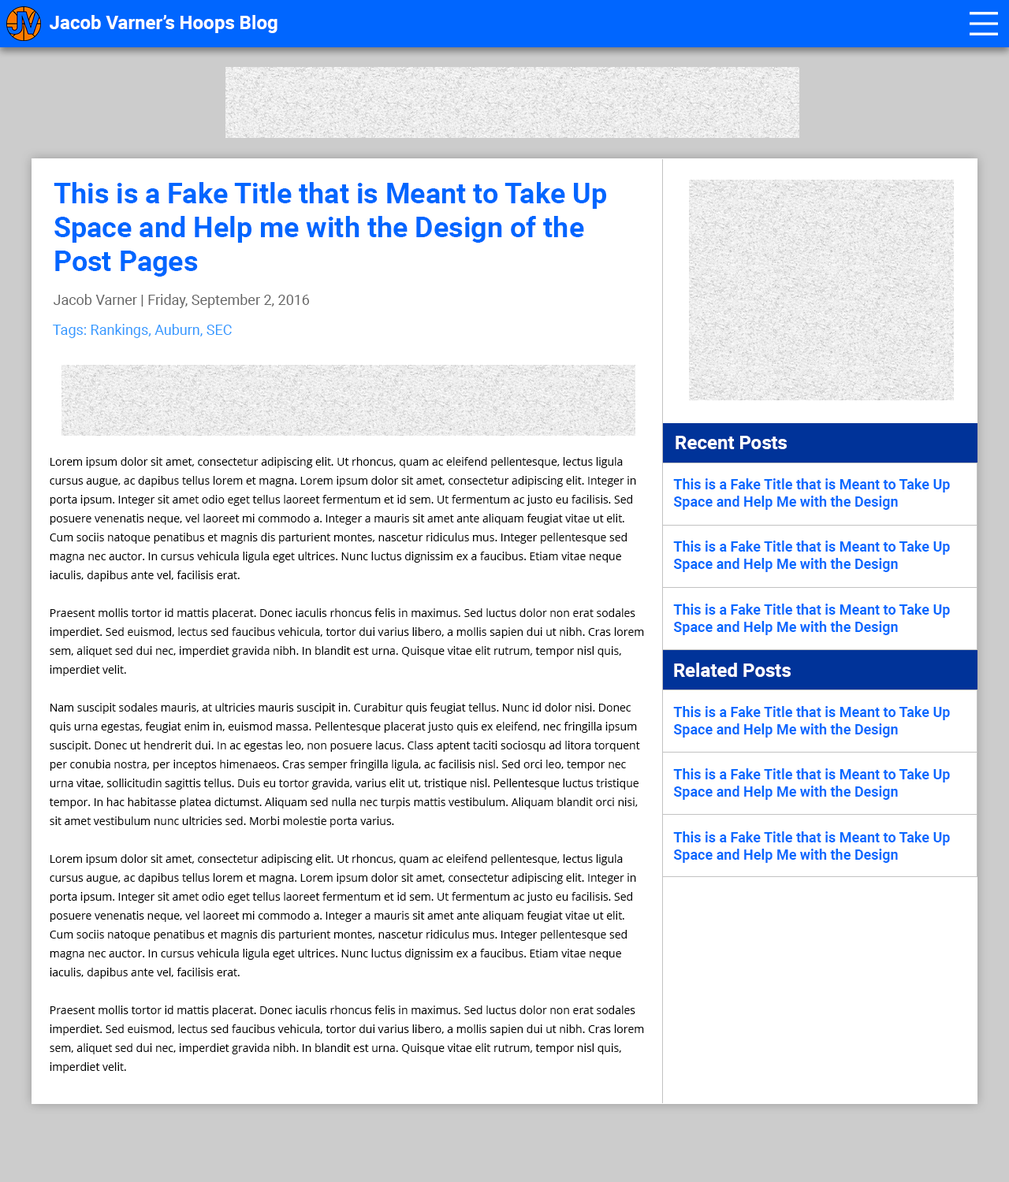
<style>
.page{position:relative;width:1009px;height:1182px;background:#ffffff}
.page>*{position:absolute;margin:0}
.t1{font:18.9px "Roboto-Bold";color:#ffffff}
.t2{font:28.4px "Roboto-Bold";color:#0066ff}
.t3{font:14.2px "Roboto-Regular";color:#666666}
.t4{font:14.2px "Roboto-Regular";color:#3399ff}
.t5{font:11px/18.9px "OpenSans";color:#000000}
.t6{font:14.2px "Roboto-Bold";color:#0769ff}
</style>
<div class="page">
<p class="t1" style="left:50px;top:15px;width:227px;height:18px">Jacob Varner’s Hoops Blog</p>
<p class="t2" style="left:54px;top:182px;width:553px;height:95px">This is a Fake Title that is Meant to Take Up<br>Space and Help me with the Design of the<br>Post Pages</p>
<p class="t3" style="left:54px;top:294px;width:256px;height:14px">Jacob Varner | Friday, September 2, 2016</p>
<p class="t4" style="left:53px;top:324px;width:179px;height:14px">Tags: Rankings, Auburn, SEC</p>
<p class="t1" style="left:675px;top:436px;width:111px;height:13px">Recent Posts</p>
<p class="t5" style="left:49px;top:457px;width:595px;height:616px">Lorem ipsum dolor sit amet, consectetur adipiscing elit. Ut rhoncus, quam ac eleifend pellentesque, lectus ligula<br>cursus augue, ac dapibus tellus lorem et magna. Lorem ipsum dolor sit amet, consectetur adipiscing elit. Integer in<br>porta ipsum. Integer sit amet odio eget tellus laoreet fermentum et id sem. Ut fermentum ac justo eu facilisis. Sed<br>posuere venenatis neque, vel laoreet mi commodo a. Integer a mauris sit amet ante aliquam feugiat vitae ut elit.<br>Cum sociis natoque penatibus et magnis dis parturient montes, nascetur ridiculus mus. Integer pellentesque sed<br>magna nec auctor. In cursus vehicula ligula eget ultrices. Nunc luctus dignissim ex a faucibus. Etiam vitae neque<br>iaculis, dapibus ante vel, facilisis erat.<br><br>Praesent mollis tortor id mattis placerat. Donec iaculis rhoncus felis in maximus. Sed luctus dolor non erat sodales<br>imperdiet. Sed euismod, lectus sed faucibus vehicula, tortor dui varius libero, a mollis sapien dui ut nibh. Cras lorem<br>sem, aliquet sed dui nec, imperdiet gravida nibh. In blandit est urna. Quisque vitae elit rutrum, tempor nisl quis,<br>imperdiet velit.<br><br>Nam suscipit sodales mauris, at ultricies mauris suscipit in. Curabitur quis feugiat tellus. Nunc id dolor nisi. Donec<br>quis urna egestas, feugiat enim in, euismod massa. Pellentesque placerat justo quis ex eleifend, nec fringilla ipsum<br>suscipit. Donec ut hendrerit dui. In ac egestas leo, non posuere lacus. Class aptent taciti sociosqu ad litora torquent<br>per conubia nostra, per inceptos himenaeos. Cras semper fringilla ligula, ac facilisis nisl. Sed orci leo, tempor nec<br>urna vitae, sollicitudin sagittis tellus. Duis eu tortor gravida, varius elit ut, tristique nisl. Pellentesque luctus tristique<br>tempor. In hac habitasse platea dictumst. Aliquam sed nulla nec turpis mattis vestibulum. Aliquam blandit orci nisi,<br>sit amet vestibulum nunc ultricies sed. Morbi molestie porta varius.<br><br>Lorem ipsum dolor sit amet, consectetur adipiscing elit. Ut rhoncus, quam ac eleifend pellentesque, lectus ligula<br>cursus augue, ac dapibus tellus lorem et magna. Lorem ipsum dolor sit amet, consectetur adipiscing elit. Integer in<br>porta ipsum. Integer sit amet odio eget tellus laoreet fermentum et id sem. Ut fermentum ac justo eu facilisis. Sed<br>posuere venenatis neque, vel laoreet mi commodo a. Integer a mauris sit amet ante aliquam feugiat vitae ut elit.<br>Cum sociis natoque penatibus et magnis dis parturient montes, nascetur ridiculus mus. Integer pellentesque sed<br>magna nec auctor. In cursus vehicula ligula eget ultrices. Nunc luctus dignissim ex a faucibus. Etiam vitae neque<br>iaculis, dapibus ante vel, facilisis erat.<br><br>Praesent mollis tortor id mattis placerat. Donec iaculis rhoncus felis in maximus. Sed luctus dolor non erat sodales<br>imperdiet. Sed euismod, lectus sed faucibus vehicula, tortor dui varius libero, a mollis sapien dui ut nibh. Cras lorem<br>sem, aliquet sed dui nec, imperdiet gravida nibh. In blandit est urna. Quisque vitae elit rutrum, tempor nisl quis,<br>imperdiet velit.</p>
<p class="t6" style="left:673px;top:478px;width:277px;height:32px">This is a Fake Title that is Meant to Take Up<br>Space and Help Me with the Design</p>
<p class="t6" style="left:673px;top:541px;width:277px;height:31px">This is a Fake Title that is Meant to Take Up<br>Space and Help Me with the Design</p>
<p class="t6" style="left:673px;top:604px;width:277px;height:31px">This is a Fake Title that is Meant to Take Up<br>Space and Help Me with the Design</p>
<p class="t1" style="left:674px;top:663px;width:116px;height:14px">Related Posts</p>
<p class="t6" style="left:673px;top:706px;width:277px;height:32px">This is a Fake Title that is Meant to Take Up<br>Space and Help Me with the Design</p>
<p class="t6" style="left:673px;top:768px;width:277px;height:32px">This is a Fake Title that is Meant to Take Up<br>Space and Help Me with the Design</p>
<p class="t6" style="left:673px;top:831px;width:277px;height:32px">This is a Fake Title that is Meant to Take Up<br>Space and Help Me with the Design</p>
</div>
